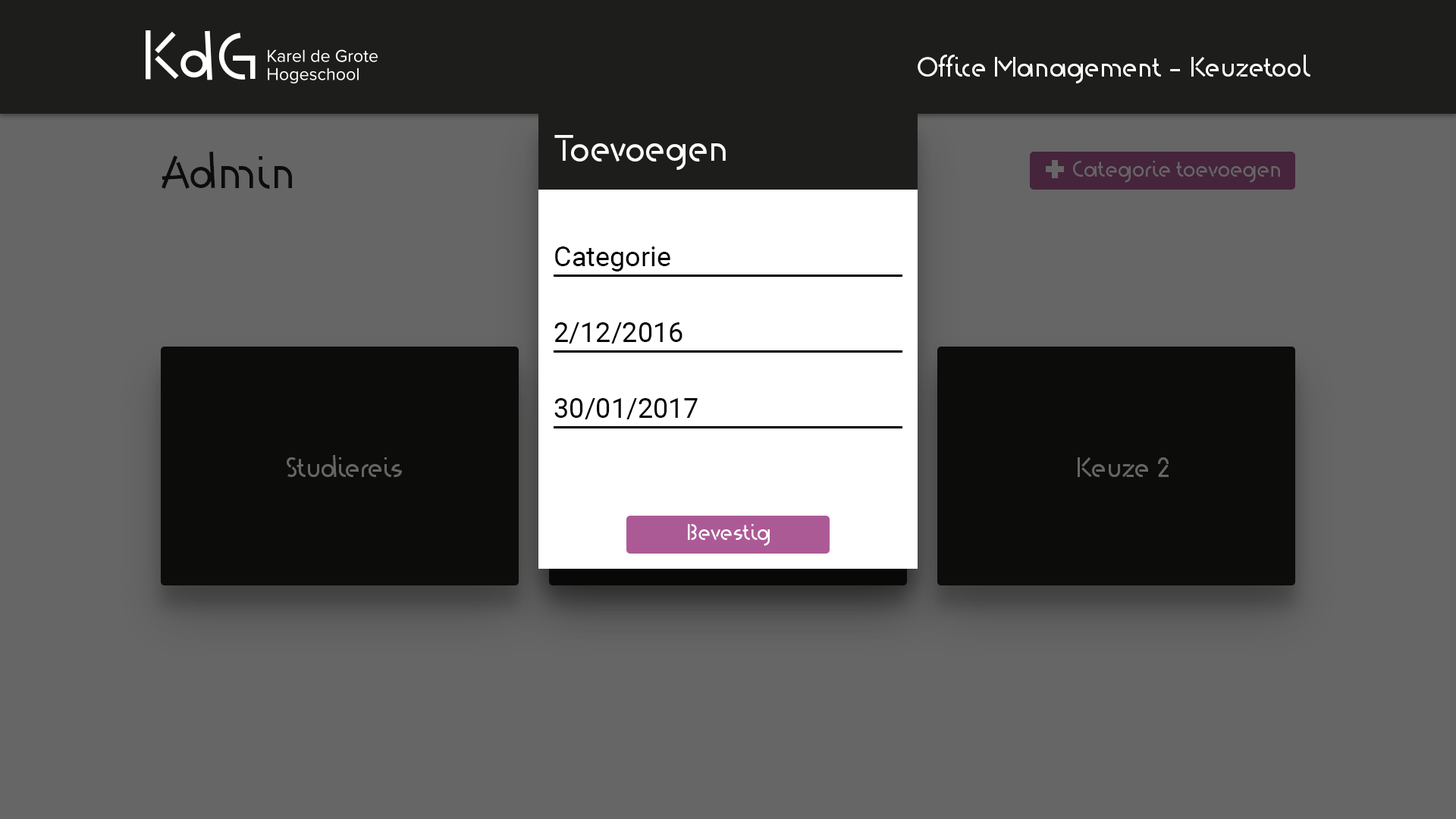
<style>
.page{position:relative;width:1456px;height:819px;background:#666666}
.page>*{position:absolute;margin:0}
.t1{font:27.3px "KdG-Regular";color:#fefefe}
.t2{font:36.4px "KdG-Regular";color:#fefefe}
.t3{font:45.5px "KdG-Regular";color:#1d1d1b}
.t4{font:22.7px "KdG-Regular";color:#666666}
.t5{font:27.3px "Roboto-Regular";color:#000000}
.t6{font:27.3px "KdG-Regular";color:#666666}
.t7{font:22.7px "KdG-Regular";color:#fefefe}
</style>
<div class="page">
<p class="t1" style="left:918px;top:55px;width:392px;height:28px">Office Management - Keuzetool</p>
<p class="t2" style="left:554px;top:135px;width:172px;height:35px">Toevoegen</p>
<p class="t3" style="left:162px;top:152px;width:130px;height:37px">Admin</p>
<p class="t4" style="left:1073px;top:161px;width:207px;height:22px">Categorie toevoegen</p>
<p class="t5" style="left:555px;top:246px;width:115px;height:25px">Categorie</p>
<p class="t5" style="left:554px;top:322px;width:128px;height:22px">2/12/2016</p>
<p class="t5" style="left:554px;top:398px;width:144px;height:21px">30/01/2017</p>
<p class="t6" style="left:287px;top:455px;width:115px;height:22px">Studiereis</p>
<p class="t6" style="left:1078px;top:457px;width:91px;height:20px">Keuze 2</p>
<p class="t7" style="left:688px;top:524px;width:82px;height:22px">Bevestig</p>
</div>
